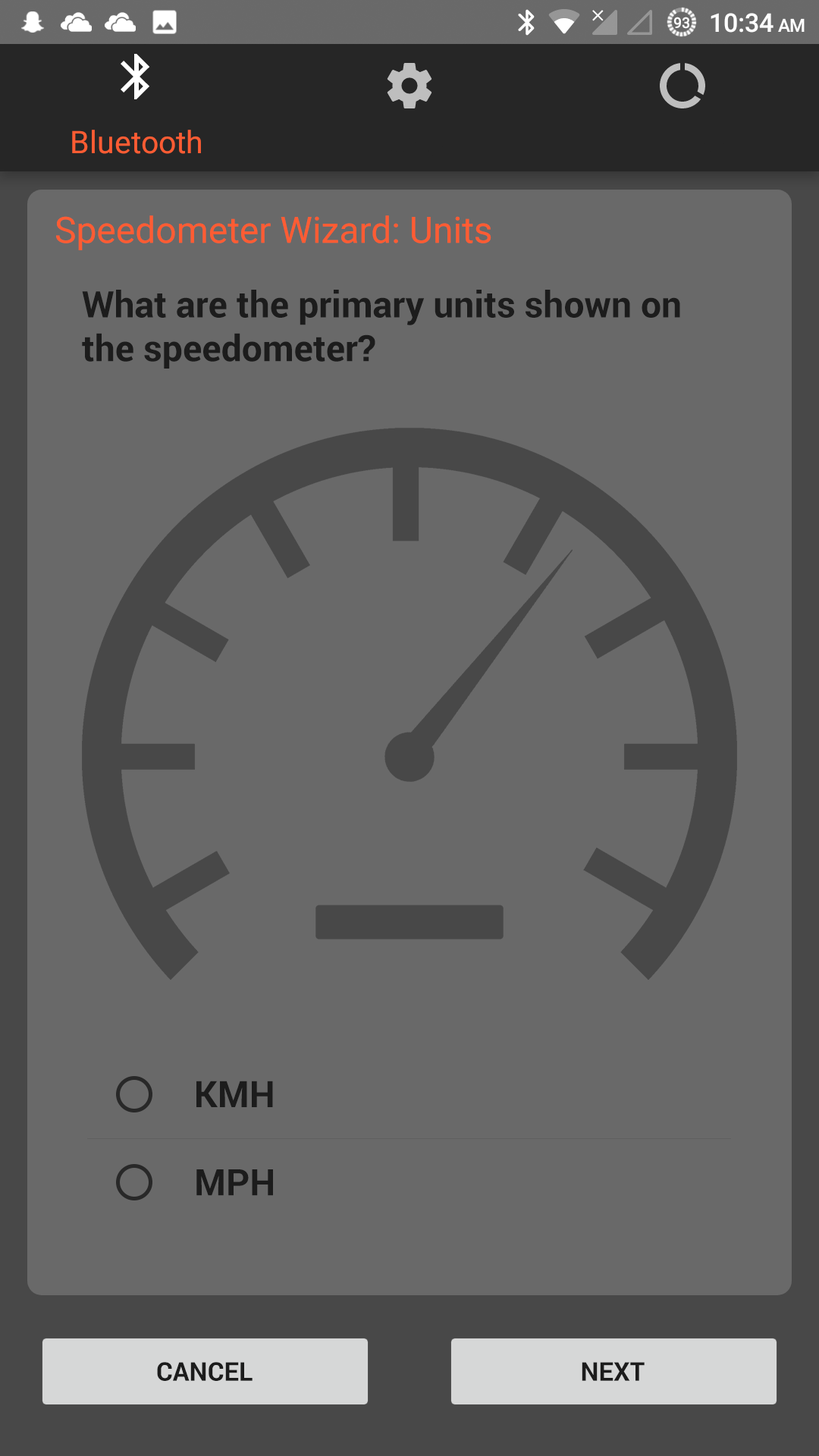
<style>
.page{position:relative;width:819px;height:1456px;background:#696969}
.page>*{position:absolute;margin:0}
.t1{font:36.4px "Roboto-Regular";color:#ff5c33}
.t2{font:36.4px "Roboto-Bold";color:#1c1c1c}
.t3{font:25.8px "Roboto-Bold";color:#1c1c1c}
</style>
<div class="page">
<p class="t1" style="left:56px;top:215px;width:435px;height:35px">Speedometer Wizard: Units</p>
<p class="t2" style="left:82px;top:290px;width:598px;height:79px">What are the primary units shown on<br>the speedometer?</p>
<p class="t2" style="left:196px;top:1081px;width:77px;height:26px">KMH</p>
<p class="t2" style="left:196px;top:1169px;width:77px;height:27px">MPH</p>
<p class="t3" style="left:157px;top:1362px;width:96px;height:19px">CANCEL</p>
<p class="t3" style="left:582px;top:1362px;width:63px;height:19px">NEXT</p>
</div>
